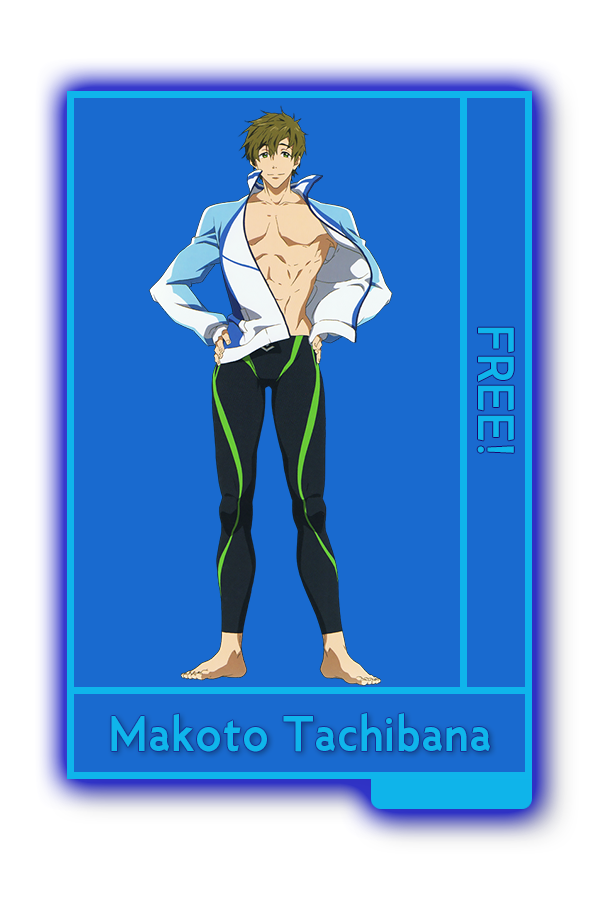
<style>
.page{position:relative;width:600px;height:900px;background:#196acf}
.page>*{position:absolute;margin:0}
.t1{font:47.8px "Ancillary-Bold";color:#0fb5eb}
.t2{font:46.7px "Ancillary-Bold";color:#0fb5eb}
</style>
<div class="page">
<p class="t1" style="left:477px;top:327px;width:37px;height:126px;rotate:90deg">FREE!</p>
<p class="t2" style="left:111px;top:713px;width:379px;height:39px">Makoto Tachibana</p>
</div>
